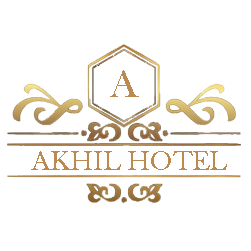
<style>
.page{position:relative;width:251px;height:251px;background:#ffffff}
.page>*{position:absolute;margin:0}
.t1{font:40px "BaskOldFace";color:#bc8a50}
.t2{font:28px "BaskOldFace";color:#bc8a50}
</style>
<div class="page">
<p class="t1" style="left:110px;top:70px;width:29px;height:27px">A</p>
<p class="t2" style="left:31px;top:151px;width:196px;height:19px">AKHIL HOTEL</p>
</div>
